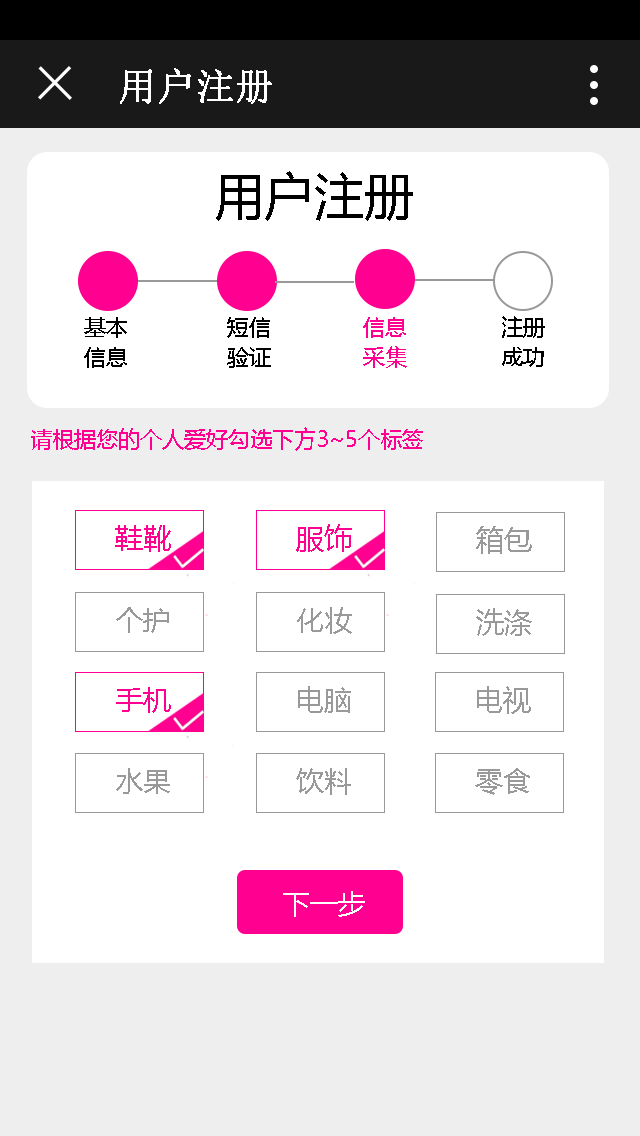
<style>
.page{position:relative;width:640px;height:1136px;background:#ffffff}
.page>*{position:absolute;margin:0}
.t1{font:38px "SimSun";color:#ffffff;font-weight:bold}
.t2{font:50px "MicrosoftYaHei";color:#000000}
.t3{font:22px/30px "MicrosoftYaHei";color:#000000}
.t4{font:22px/30px "MicrosoftYaHei";color:#ff0090}
.t5{font:22px "MicrosoftYaHei";color:#ff0090}
.t6{font:28px "MicrosoftYaHei";color:#ff0090}
.t7{font:28px "MicrosoftYaHei";color:#999999}
.t8{font:28px "MicrosoftYaHei";color:#ffffff}
</style>
<div class="page">
<p class="t1" style="left:120px;top:68px;width:152px;height:36px">用户注册</p>
<p class="t2" style="left:216px;top:171px;width:197px;height:50px">用户注册</p>
<p class="t3" style="left:84px;top:317px;width:43px;height:51px">基本<br>信息</p>
<p class="t3" style="left:227px;top:317px;width:44px;height:51px">短信<br>验证</p>
<p class="t4" style="left:363px;top:317px;width:44px;height:51px">信息<br>采集</p>
<p class="t3" style="left:502px;top:316px;width:43px;height:51px">注册<br>成功</p>
<p class="t5" style="left:31px;top:427px;width:392px;height:24px">请根据您的个人爱好勾选下方3~5个标签</p>
<p class="t6" style="left:115px;top:525px;width:56px;height:27px">鞋靴</p>
<p class="t6" style="left:296px;top:524px;width:56px;height:28px">服饰</p>
<p class="t7" style="left:476px;top:526px;width:56px;height:28px">箱包</p>
<p class="t7" style="left:116px;top:607px;width:53px;height:26px">个护</p>
<p class="t7" style="left:297px;top:607px;width:55px;height:27px">化妆</p>
<p class="t7" style="left:476px;top:608px;width:56px;height:28px">洗涤</p>
<p class="t6" style="left:116px;top:687px;width:55px;height:26px">手机</p>
<p class="t7" style="left:298px;top:686px;width:53px;height:27px">电脑</p>
<p class="t7" style="left:477px;top:686px;width:54px;height:28px">电视</p>
<p class="t7" style="left:116px;top:768px;width:54px;height:26px">水果</p>
<p class="t7" style="left:296px;top:768px;width:55px;height:27px">饮料</p>
<p class="t7" style="left:475px;top:768px;width:55px;height:27px">零食</p>
<p class="t8" style="left:283px;top:891px;width:82px;height:26px">下一步</p>
</div>
